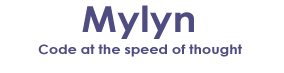
<style>
.page{position:relative;width:284px;height:73px;background:#ffffff}
.page>*{position:absolute;margin:0}
.t1{font:36px "CenturyGothic-Bold";color:#4f4c81;scale:1.1 1}
.t2{font:13px "CenturyGothic-Bold";color:#4f4c81;scale:1.1 1}
</style>
<div class="page">
<p class="t1" style="left:82px;top:5px;width:112px;height:34px">Mylyn</p>
<p class="t2" style="left:38px;top:44px;width:204px;height:13px">Code at the speed of thought</p>
</div>
